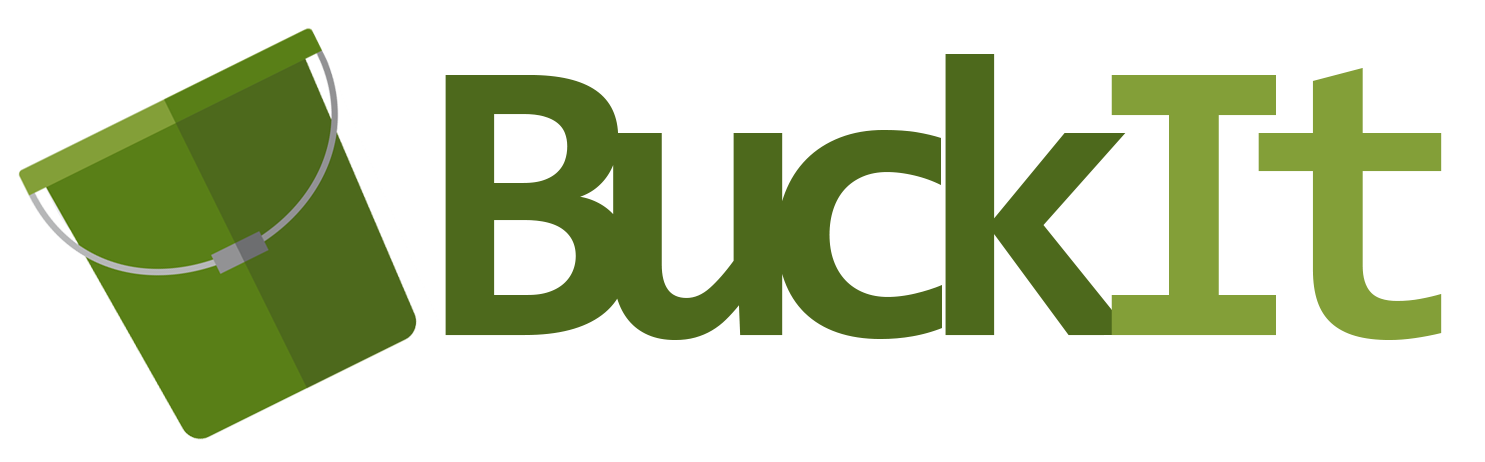
<style>
.page{position:relative;width:1485px;height:462px;background:#ffffff}
.page>*{position:absolute;margin:0}
.t1{font:406.6px "Consolas-Bold";letter-spacing:-0.143em;color:#4d691c}
.t2{font:406.6px "Consolas-Bold";letter-spacing:-0.143em;color:#839f38}
</style>
<div class="page">
<p class="t1" style="left:445px;top:54px;width:997px;height:286px">Buck<span class="t2">It</span></p>
</div>
